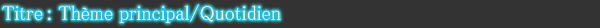
<style>
.page{position:relative;width:600px;height:28px;background:#333333}
.page>*{position:absolute;margin:0}
.t1{font:20px "MS-PMincho";color:#ffffff}
</style>
<div class="page">
<p class="t1" style="left:2px;top:4px;width:279px;height:19px">Titre : Thème principal/Quotidien</p>
</div>
